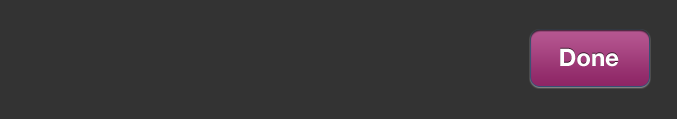
<style>
.page{position:relative;width:677px;height:119px;background:#333333}
.page>*{position:absolute;margin:0}
.t1{font:24px "HelveticaNeue-Bold";color:#ffffff}
</style>
<div class="page">
<p class="t1" style="left:560px;top:48px;width:59px;height:19px">Done</p>
</div>
